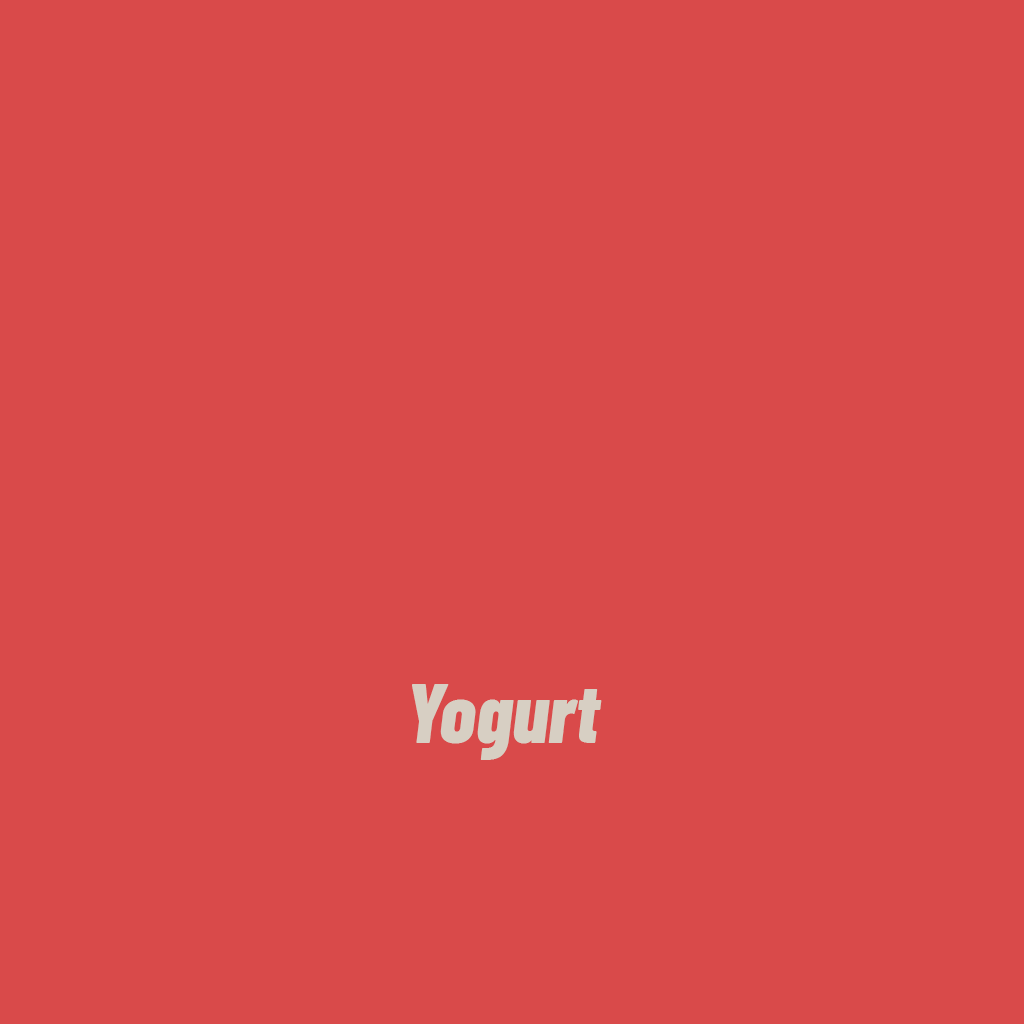
<style>
.page{position:relative;width:1024px;height:1024px;background:#d94a4a}
.page>*{position:absolute;margin:0}
.t1{font:82.6px "BarlowCondensed-ExtraBoldItalic";color:#d7cfc3}
</style>
<div class="page">
<p class="t1" style="left:412px;top:684px;width:190px;height:76px">Yogurt</p>
</div>
